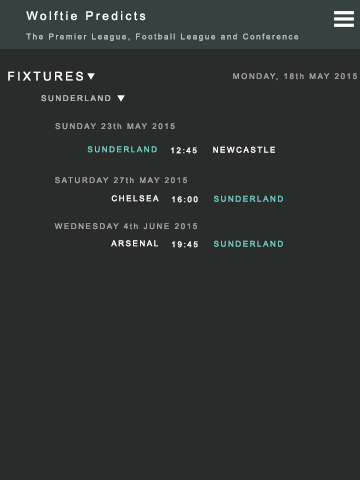
<style>
.page{position:relative;width:360px;height:480px;background:#2a2c2b}
.page>*{position:absolute;margin:0}
.t1{font:12px "ArialMT";letter-spacing:0.2em;color:#ffffff}
.t2{font:8px "ArialMT";letter-spacing:0.2em;color:#c2c2c2}
.t3{font:8px "ArialMT";letter-spacing:0.2em;color:#a5a5a5}
.t4{font:8px "ArialMT";letter-spacing:0.2em;color:#74cec5}
.t5{font:8px "ArialMT";letter-spacing:0.2em;color:#ffffff}
</style>
<div class="page">
<p class="t1" style="left:26px;top:11px;width:120px;height:10px">Wolftie Predicts</p>
<p class="t2" style="left:26px;top:33px;width:273px;height:9px">The Premier League, Football League and Conference</p>
<p class="t1" style="left:8px;top:71px;width:75px;height:10px">FIXTURES</p>
<p class="t3" style="left:233px;top:73px;width:124px;height:8px">MONDAY, 18th MAY 2015</p>
<p class="t2" style="left:41px;top:95px;width:70px;height:7px">SUNDERLAND</p>
<p class="t3" style="left:55px;top:123px;width:120px;height:7px">SUNDAY 23th MAY 2015</p>
<p class="t4" style="left:87px;top:146px;width:70px;height:7px">SUNDERLAND</p>
<p class="t5" style="left:171px;top:147px;width:26px;height:7px">12:45</p>
<p class="t5" style="left:213px;top:146px;width:62px;height:7px">NEWCASTLE</p>
<p class="t3" style="left:55px;top:177px;width:132px;height:7px">SATURDAY 27th MAY 2015</p>
<p class="t5" style="left:111px;top:195px;width:48px;height:7px">CHELSEA</p>
<p class="t5" style="left:172px;top:196px;width:26px;height:7px">16:00</p>
<p class="t4" style="left:214px;top:195px;width:69px;height:7px">SUNDERLAND</p>
<p class="t3" style="left:54px;top:223px;width:143px;height:7px">WEDNESDAY 4th JUNE 2015</p>
<p class="t5" style="left:111px;top:240px;width:47px;height:7px">ARSENAL</p>
<p class="t5" style="left:172px;top:241px;width:26px;height:7px">19:45</p>
<p class="t4" style="left:214px;top:240px;width:69px;height:7px">SUNDERLAND</p>
</div>
